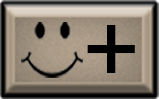
<style>
.page{position:relative;width:159px;height:99px}
.page>*{position:absolute;margin:0}
.t1{font:100.3px "ArialMT";color:#000000}
</style>
<div class="page">
<p class="t1" style="left:87px;top:25px;width:48px;height:48px">+</p>
</div>
